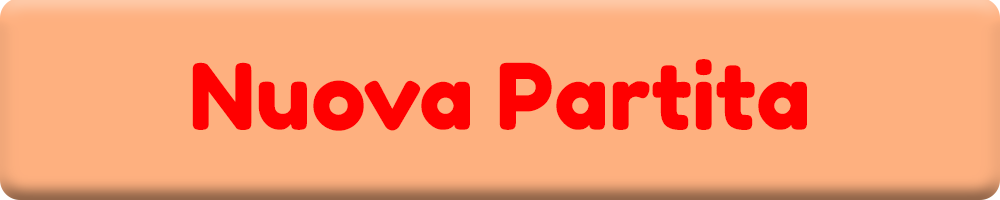
<style>
.page{position:relative;width:1000px;height:200px;background:#feb07f}
.page>*{position:absolute;margin:0}
.t1{font:91.7px "FredokaOne-Regular";color:#ff0000}
</style>
<div class="page">
<p class="t1" style="left:192px;top:59px;width:615px;height:72px">Nuova Partita</p>
</div>
